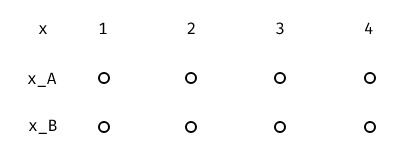
<style>
.page{position:relative;width:400px;height:157px;background:#ffffff}
.page>*{position:absolute;margin:0}
.t1{font:16px "FiraCode-Regular";color:#000000}
</style>
<div class="page">
<p class="t1" style="left:38px;top:25px;width:9px;height:9px">x</p>
<p class="t1" style="left:99px;top:22px;width:274px;height:13px">1        2        3        4</p>
<p class="t1" style="left:27px;top:72px;width:30px;height:15px">x_A</p>
<p class="t1" style="left:28px;top:119px;width:29px;height:15px">x_B</p>
</div>
